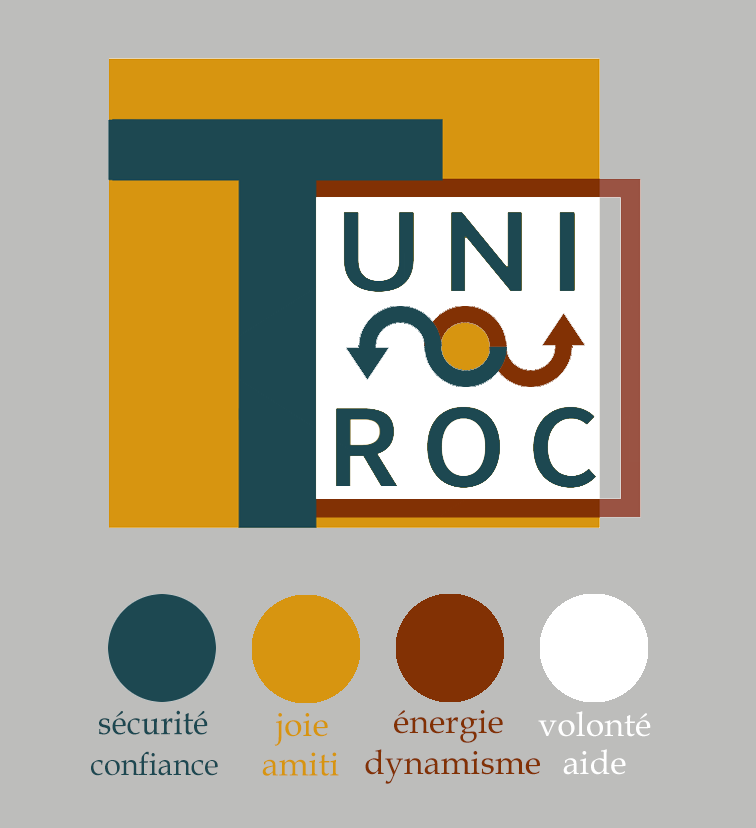
<style>
.page{position:relative;width:756px;height:828px;background:#bdbdbb}
.page>*{position:absolute;margin:0}
.t1{font:34.4px "BookAntiqua";color:#1d4851;scale:0.93 1}
.t2{font:34px "BookAntiqua";color:#d79510}
.t3{font:34px "BookAntiqua";color:#823104}
.t4{font:34px "BookAntiqua";color:#ffffff}
.t5{font:32px "BookAntiqua";color:#1d4851;scale:0.96 1}
</style>
<div class="page">
<p class="t1" style="left:99px;top:710px;width:109px;height:25px">sécurité</p>
<p class="t2" style="left:274px;top:713px;width:54px;height:33px">joie</p>
<p class="t3" style="left:394px;top:710px;width:109px;height:33px">énergie</p>
<p class="t4" style="left:538px;top:711px;width:113px;height:26px">volonté</p>
<p class="t3" style="left:365px;top:749px;width:175px;height:35px">dynamisme</p>
<p class="t4" style="left:563px;top:749px;width:63px;height:26px">aide</p>
<p class="t5" style="left:91px;top:751px;width:127px;height:25px">confiance</p>
<p class="t2" style="left:262px;top:752px;width:77px;height:24px">amiti</p>
</div>
